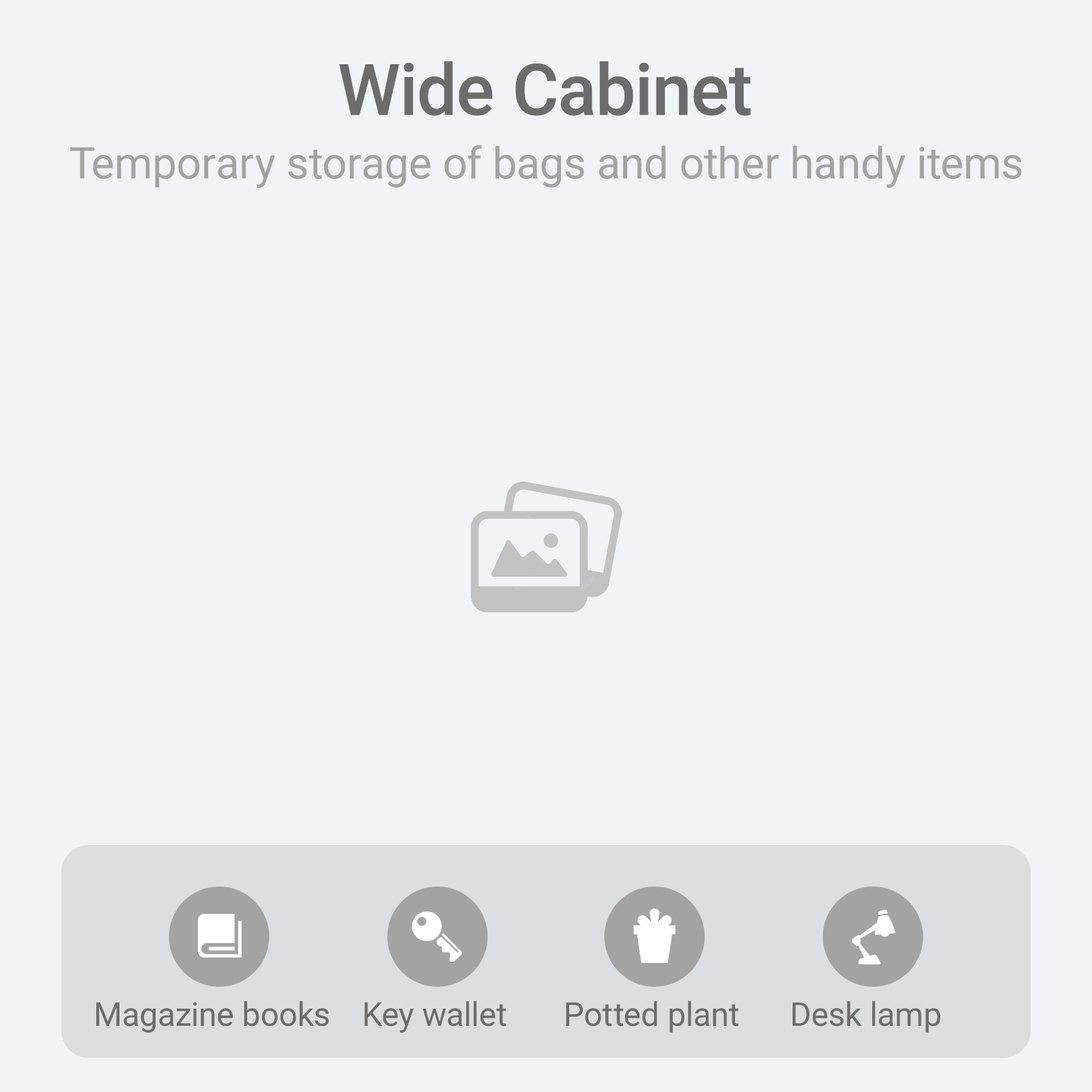
<style>
.page{position:relative;width:1092px;height:1092px;background:#f2f3f6}
.page>*{position:absolute;margin:0}
.t1{font:71.3px "Roboto-Medium";color:#6c6c6c}
.t2{font:43.7px "Roboto-Regular";color:#a3a3a3}
.t3{font:32.8px "Roboto-Regular";color:#6c6c6c}
</style>
<div class="page">
<p class="t1" style="left:339px;top:61px;width:412px;height:55px">Wide Cabinet</p>
<p class="t2" style="left:70px;top:145px;width:952px;height:43px">Temporary storage of bags and other handy items</p>
<p class="t3" style="left:96px;top:1001px;width:233px;height:32px">Magazine books</p>
<p class="t3" style="left:364px;top:1001px;width:142px;height:32px">Key wallet</p>
<p class="t3" style="left:566px;top:1001px;width:172px;height:32px">Potted plant</p>
<p class="t3" style="left:792px;top:1001px;width:148px;height:32px">Desk lamp</p>
</div>
